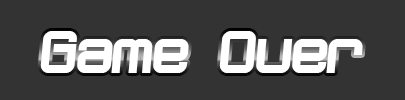
<style>
.page{position:relative;width:405px;height:100px;background:#333333}
.page>*{position:absolute;margin:0}
.t1{font:64.1px "Dopenakedfoulphatrelaxed";color:#ffffff}
</style>
<div class="page">
<p class="t1" style="left:40px;top:31px;width:323px;height:42px">Game Over</p>
</div>
